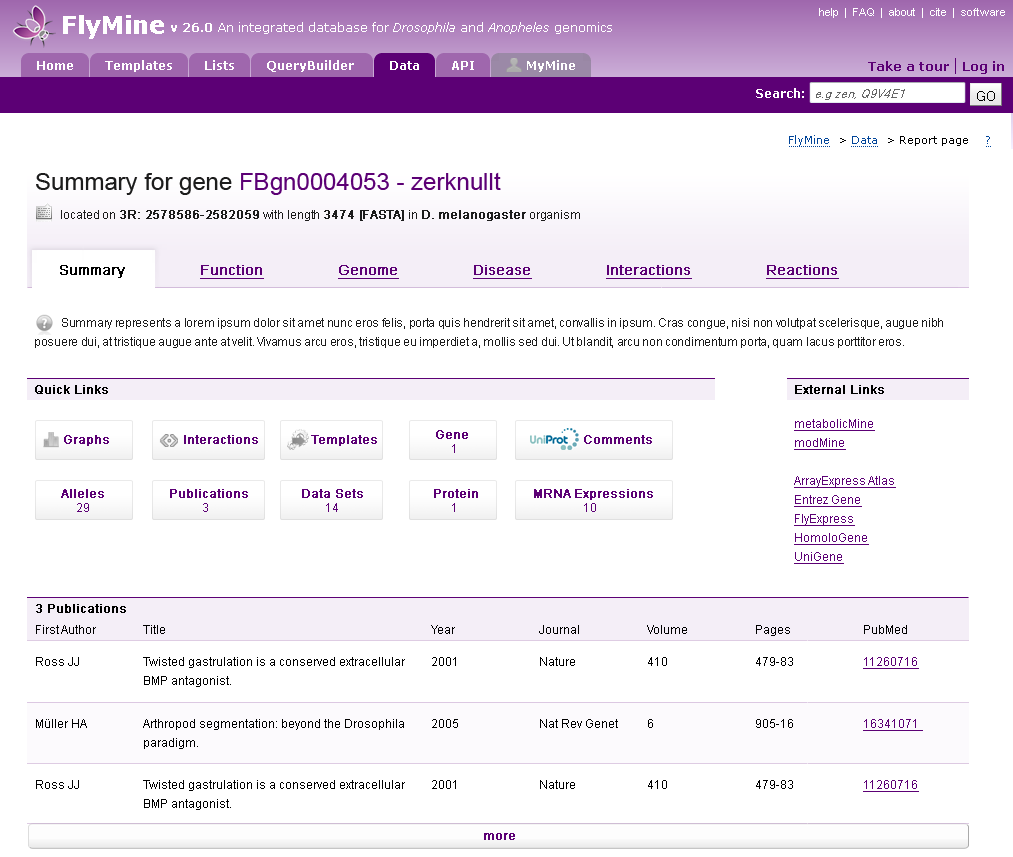
<style>
.page{position:relative;width:1013px;height:857px;background:#ffffff}
.page>*{position:absolute;margin:0}
.t1{font:24px "ArialMT";color:#5c0075}
.t2{font:24px "ArialMT";color:#1c1c1c}
.t3{font:12px "ArialMT";letter-spacing:-0.01em;color:#1c1c1c;font-weight:bold}
.t4{font:14px "ArialMT";letter-spacing:-0.01em;color:#5c0075;font-weight:bold}
.t5{font:12px "ArialMT";letter-spacing:-0.01em;color:#1c1c1c}
.t6{font:14px "ArialMT";color:#5c0075;font-weight:bold;text-decoration:underline}
.t7{font:14px "ArialMT";color:#000000;font-weight:bold}
.t8{font:12px/19px "ArialMT";letter-spacing:-0.025em;color:#1c1c1c}
.t9{font:12px "ArialMT";color:#000000;font-weight:bold}
.t10{font:12px/19px "ArialMT";color:#5c0075;text-decoration:underline}
.t11{font:12px/19px "ArialMT";color:#5c0075;font-weight:bold}
.t12{font:12px/24px "ArialMT";color:#5c0075;font-weight:bold}
.t13{font:12px "ArialMT";color:#5c0075}
.t14{font:12px "ArialMT";color:#5c0075;font-weight:bold}
.t15{font:12px "ArialMT";color:#000000}
.t16{font:12px/19px "ArialMT";color:#000000}
</style>
<div class="page">
<p class="t1" style="left:36px;top:172px;width:465px;height:23px"><span class="t2">Summary for gene </span>FBgn0004053 - zerknullt</p>
<p class="t3" style="left:61px;top:210px;width:519px;height:11px"><span class="t4">     </span><span class="t5">located on </span>3R: 2578586-2582059<span class="t5"> with length </span>3474 [FASTA]<span class="t5"> in </span>D. melanogaster<span class="t5"> organism</span></p>
<p class="t6" style="left:60px;top:265px;width:779px;height:14px"><span class="t7">Summary               </span>Function               Genome               Disease               Interactions               Reactions</p>
<p class="t8" style="left:35px;top:318px;width:908px;height:30px">Summary represents a lorem ipsum dolor sit amet nunc eros felis, porta quis hendrerit sit amet, convallis in ipsum. Cras congue, nisi non volutpat scelerisque, augue nibh<br>posuere dui, at tristique augue ante at velit. Vivamus arcu eros, tristique eu imperdiet a, mollis sed dui. Ut blandit, arcu non condimentum porta, quam lacus porttitor eros.</p>
<p class="t9" style="left:35px;top:385px;width:73px;height:9px">Quick Links</p>
<p class="t9" style="left:795px;top:385px;width:89px;height:9px">External Links</p>
<p class="t10" style="left:794px;top:419px;width:102px;height:145px">metabolicMine<br>modMine<br><br>ArrayExpress Atlas<br>Entrez Gene<br>FlyExpress<br>HomoloGene<br>UniGene</p>
<p class="t11" style="left:64px;top:430px;width:588px;height:23px">Graphs         Interactions             Templates        Gene                      <span class="t12">Comments<br>             </span><span class="t13">1</span></p>
<p class="t14" style="left:61px;top:489px;width:592px;height:23px">Alleles          Publications             Data Sets             Protein           MRNA Expressions<br><span class="t13">     29              3       14             1                    10</span></p>
<p class="t9" style="left:36px;top:604px;width:90px;height:9px">3 Publications</p>
<p class="t15" style="left:36px;top:625px;width:871px;height:11px">First Author  Title        Year   Journal  Volume  Pages  PubMed</p>
<p class="t16" style="left:36px;top:657px;width:883px;height:30px">Ross JJ  Twisted gastrulation is a conserved extracellular 2001   Nature  410   479-83  <span class="t10">11260716<br></span>   BMP antagonist.</p>
<p class="t16" style="left:36px;top:719px;width:887px;height:30px">Müller HA  Arthropod segmentation: beyond the Drosophila 2005   Nat Rev Genet 6   905-16  <span class="t10">16341071 </span><br>   paradigm.</p>
<p class="t16" style="left:36px;top:780px;width:883px;height:30px">Ross JJ  Twisted gastrulation is a conserved extracellular 2001   Nature  410   479-83  <span class="t10">11260716<br></span>   BMP antagonist.</p>
<p class="t14" style="left:484px;top:833px;width:31px;height:7px">more</p>
</div>
